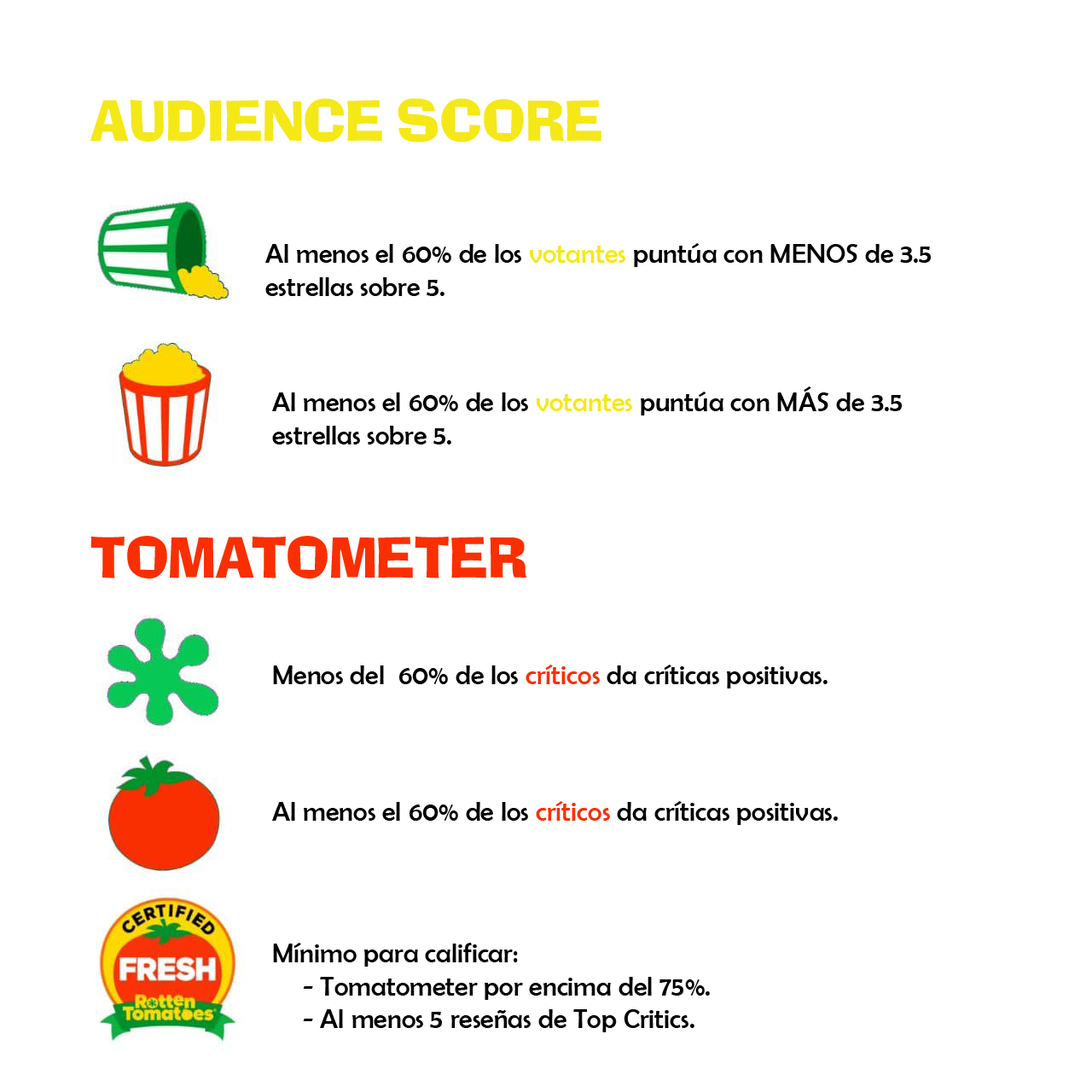
<style>
.page{position:relative;width:1092px;height:1092px;background:#ffffff}
.page>*{position:absolute;margin:0}
.t1{font:54.6px "AdLib";color:#f5e817}
.t2{font:27.3px "BerlinSansFB-Reg";color:#010101}
.t3{font:27.3px "BerlinSansFB-Reg";color:#f5e817}
.t4{font:54.6px "AdLib";color:#f92f01}
.t5{font:27.3px "BerlinSansFB-Reg";color:#f92f01}
</style>
<div class="page">
<p class="t1" style="left:90px;top:98px;width:511px;height:44px">AUDIENCE SCORE</p>
<p class="t2" style="left:265px;top:243px;width:666px;height:53px">Al menos el 60% de los <span class="t3">votantes </span>puntúa con MENOS de 3.5 estrellas sobre 5.</p>
<p class="t2" style="left:272px;top:386px;width:630px;height:58px">Al menos el 60% de los <span class="t3">votantes </span>puntúa con MÁS de 3.5 estrellas sobre 5.</p>
<p class="t4" style="left:90px;top:536px;width:437px;height:43px">TOMATOMETER</p>
<p class="t2" style="left:273px;top:665px;width:555px;height:23px">Menos del  60% de los <span class="t5">críticos </span>da críticas positivas.</p>
<p class="t2" style="left:272px;top:801px;width:566px;height:24px">Al menos el 60% de los <span class="t5">críticos </span>da críticas positivas.</p>
<p class="t2" style="left:273px;top:943px;width:437px;height:89px">Mínimo para calificar:<br> - Tomatometer por encima del 75%. <br> - Al menos 5 reseñas de Top Critics.<br><br><br><br>dcd<br><br><br>mls cskldckdsm</p>
</div>
